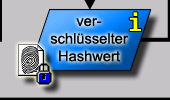
<style>
.page{position:relative;width:170px;height:100px;background:#c6c3c6}
.page>*{position:absolute;margin:0}
.t1{font:24px "Fixedsys";color:#ffff00}
.t2{font:14.7px "ArialMT";color:#000000}
</style>
<div class="page">
<p class="t1" style="left:129px;top:12px;width:12px;height:19px">i</p>
<p class="t2" style="left:50px;top:18px;width:78px;height:44px;text-align:center">ver-<br>schlüsselter<br>Hashwert</p>
</div>
